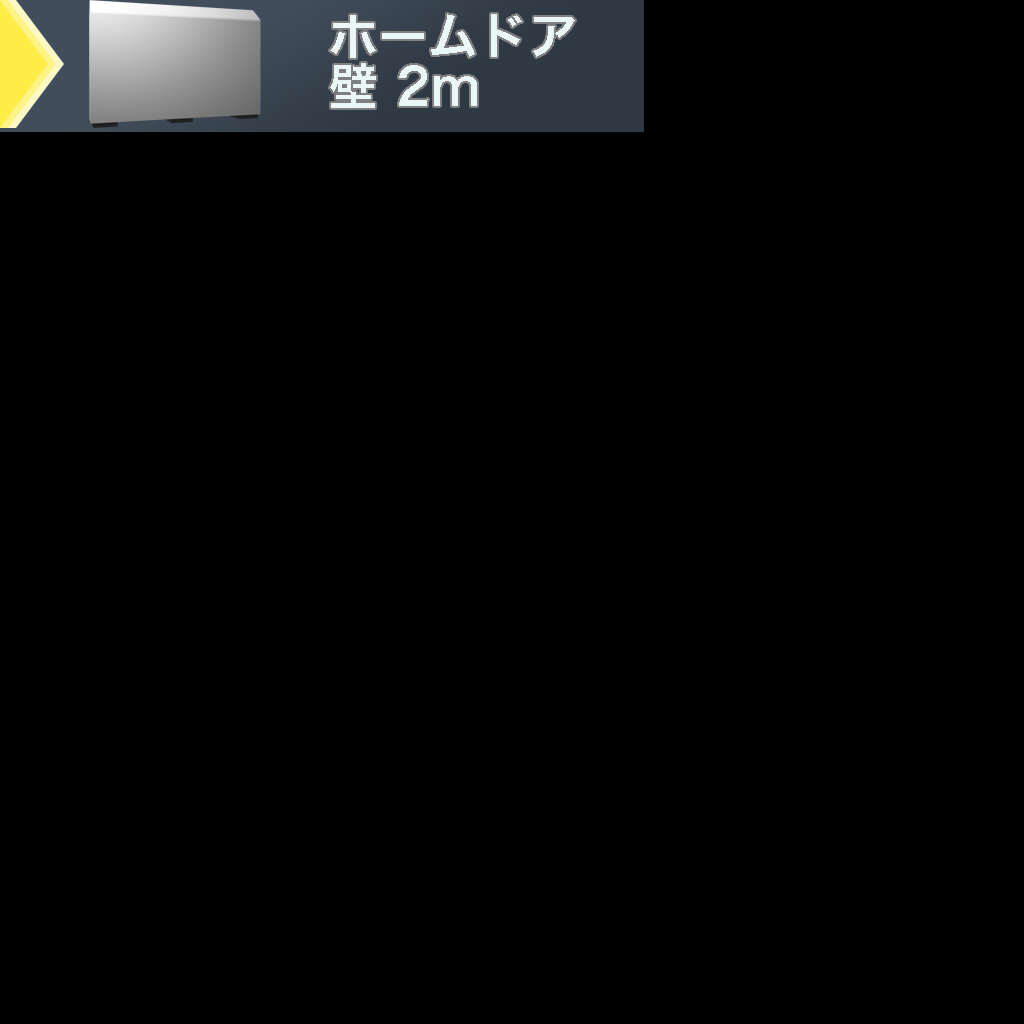
<style>
.page{position:relative;width:1024px;height:1024px;background:#000000}
.page>*{position:absolute;margin:0}
.t1{font:50px/50px "HiraKakuProN-W6";color:#ebf6f7}
</style>
<div class="page">
<p class="t1" style="left:330px;top:14px;width:245px;height:94px">ホームドア<br>壁 2m</p>
</div>
